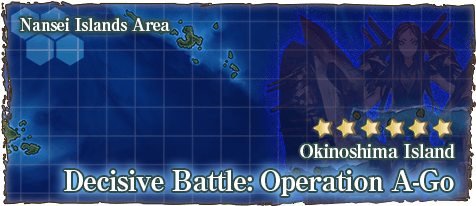
<style>
.page{position:relative;width:476px;height:206px}
.page>*{position:absolute;margin:0}
.t1{font:17px "RyuminPro-ExBold";letter-spacing:-0.04em;color:#ffffff}
.t2{font:19px "RyuminPro-ExBold";letter-spacing:-0.04em;color:#ffffff}
.t3{font:28px "RyuminPro-ExBold";letter-spacing:-0.04em;color:#ffffff}
</style>
<div class="page">
<p class="t1" style="left:20px;top:18px;width:150px;height:14px">Nansei Islands Area</p>
<p class="t2" style="left:300px;top:144px;width:155px;height:15px">Okinoshima Island</p>
<p class="t3" style="left:64px;top:169px;width:390px;height:27px">Decisive Battle: Operation A-Go</p>
</div>
